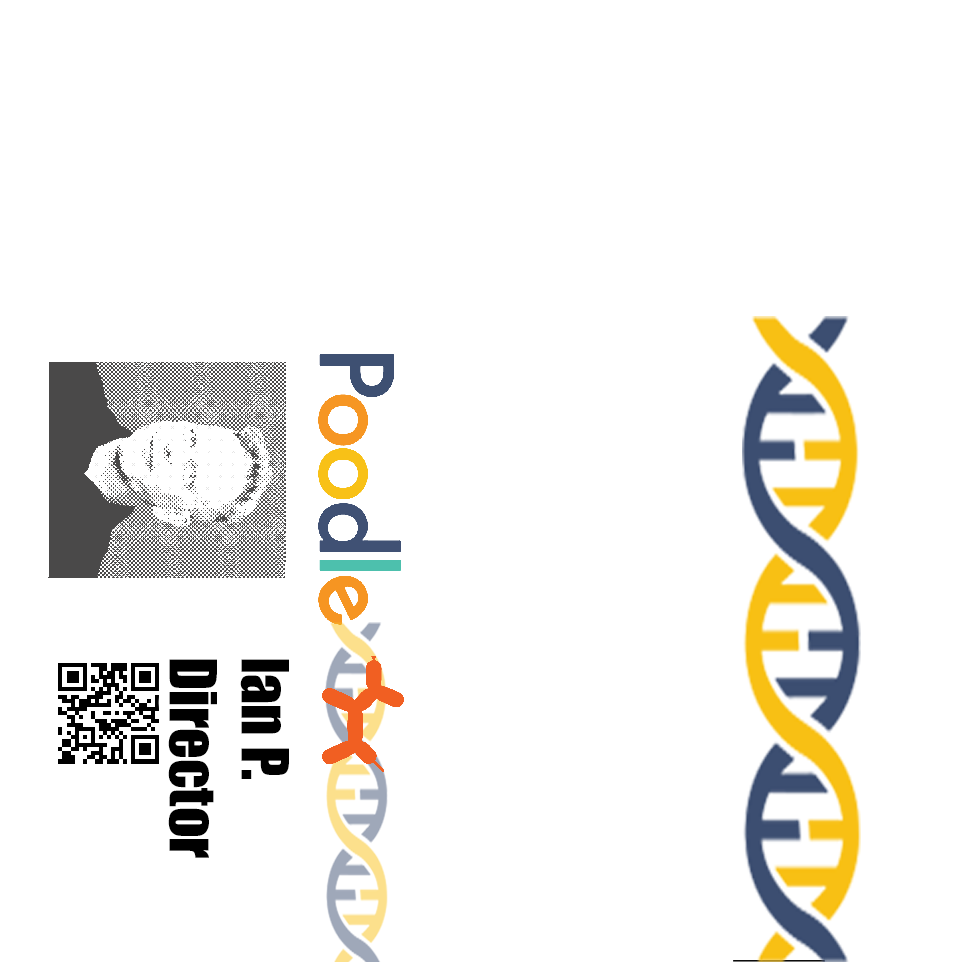
<style>
.page{position:relative;width:960px;height:962px;background:#ffffff}
.page>*{position:absolute;margin:0}
.t1{font:60px "Impact";color:#000000}
</style>
<div class="page">
<p class="t1" style="left:168px;top:659px;width:121px;height:199px;rotate:90deg">Ian P.<br>Director</p>
</div>
